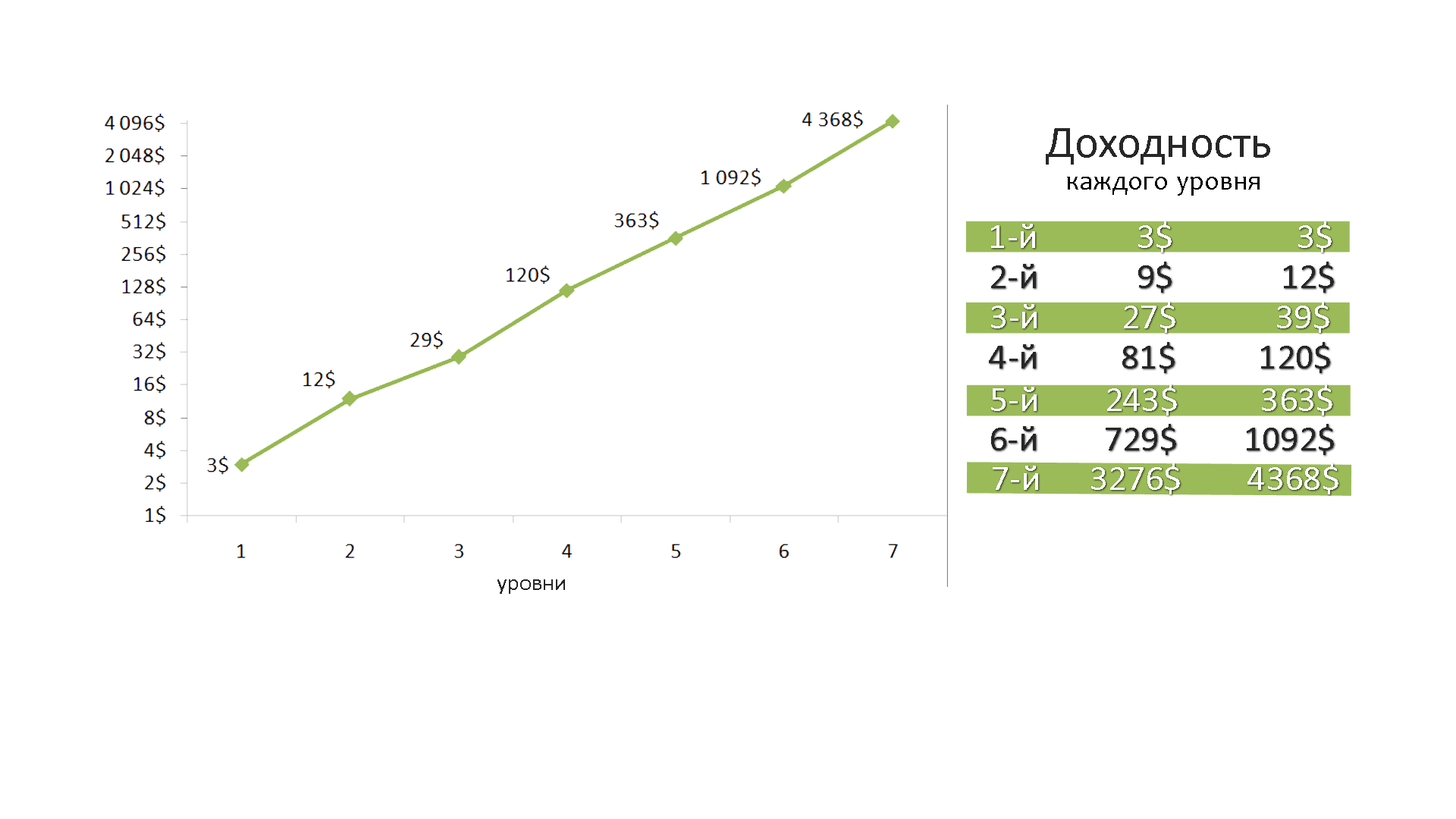
<style>
.page{position:relative;width:1456px;height:819px;background:#ffffff}
.page>*{position:absolute;margin:0}
.t1{font:45.5px "Calibri";color:#272727}
.t2{font:27.3px "Candara";color:#000000}
.t3{font:36.4px "Calibri";color:#ffffff}
.t4{font:36.4px "Calibri";color:#272626}
.t5{font:36.4px "Calibri";color:#fefefe}
.t6{font:22.7px "Calibri";color:#272626}
</style>
<div class="page">
<p class="t1" style="left:1046px;top:128px;width:224px;height:37px">Доходность</p>
<p class="t2" style="left:1067px;top:177px;width:193px;height:19px">каждого уровня</p>
<p class="t3" style="left:991px;top:221px;width:341px;height:32px">1-й            3$               3$</p>
<p class="t4" style="left:991px;top:262px;width:343px;height:31px">2-й            9$             12$</p>
<p class="t5" style="left:991px;top:302px;width:338px;height:31px">3-й          27$            39$</p>
<p class="t4" style="left:989px;top:342px;width:341px;height:31px">4-й          81$          120$</p>
<p class="t3" style="left:991px;top:384px;width:341px;height:32px">5-й        243$          363$</p>
<p class="t4" style="left:991px;top:424px;width:343px;height:31px">6-й        729$        1092$</p>
<p class="t3" style="left:993px;top:463px;width:345px;height:31px">7-й      3276$        4368$</p>
<p class="t6" style="left:497px;top:579px;width:68px;height:15px">уровни</p>
</div>
